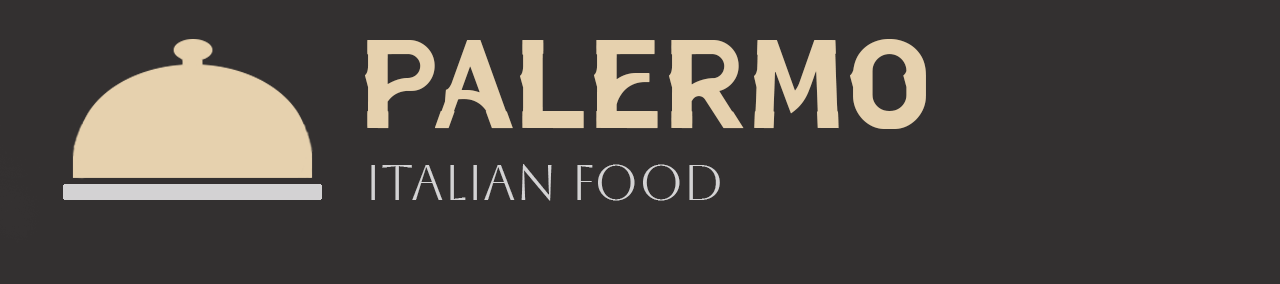
<style>
.page{position:relative;width:1280px;height:284px;background:#333030}
.page>*{position:absolute;margin:0}
.t1{font:150px "Ketoprak";color:#e6d1ae}
.t2{font:50px "Aboreto-Regular";color:#d3d2d3}
</style>
<div class="page">
<p class="t1" style="left:365px;top:39px;width:561px;height:90px">PALERMO</p>
<p class="t2" style="left:371px;top:164px;width:349px;height:37px">ITALIAN FOOD</p>
</div>
